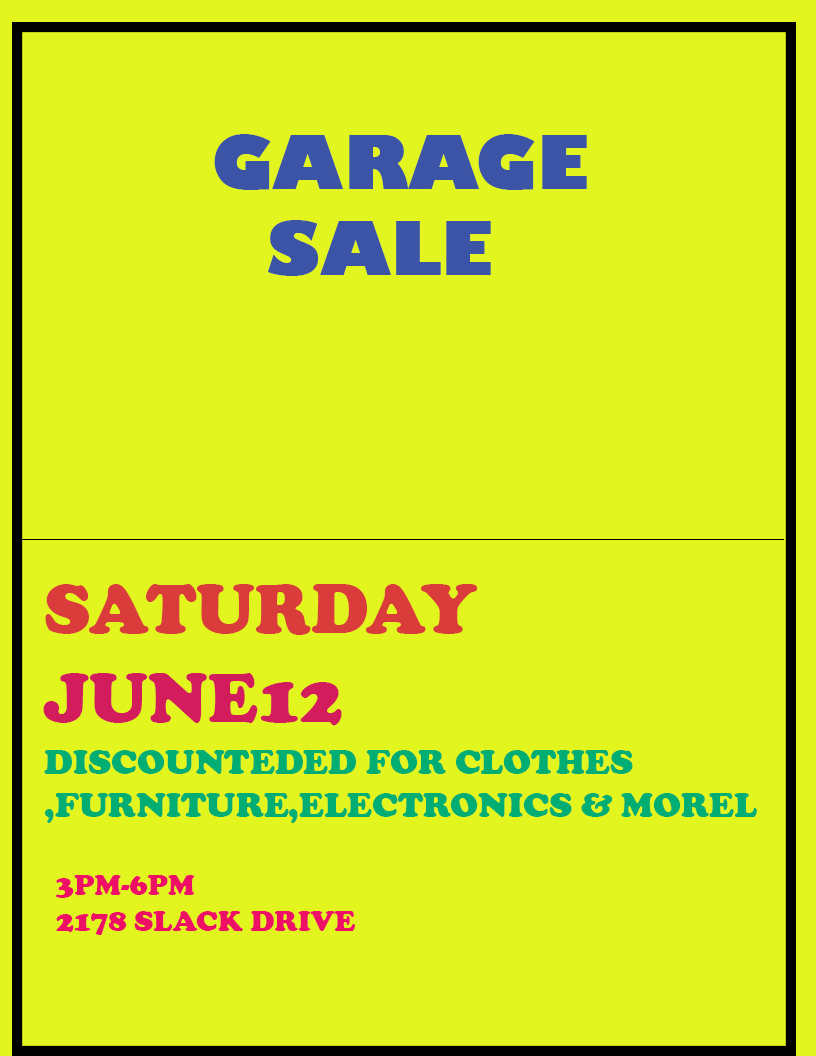
<style>
.page{position:relative;width:816px;height:1056px;background:#e3f51e}
.page>*{position:absolute;margin:0}
.t1{font:72px "GillSans-UltraBold";color:#3b54a5}
.t2{font:72px "CooperBlack";color:#000000}
.t3{font:72px "CooperBlack";color:#da3b3b}
.t4{font:72px "CooperBlack";color:#d31c5c}
.t5{font:36px "CooperBlack";color:#00ae74}
.t6{font:30px "CooperBlack";color:#ed1065}
</style>
<div class="page">
<p class="t1" style="left:214px;top:134px;width:373px;height:142px;text-align:right"><span class="t2">    </span>GARAGE<br>SALE</p>
<p class="t3" style="left:45px;top:584px;width:433px;height:51px">SATURDAY<span class="t2">AY</span></p>
<p class="t4" style="left:43px;top:673px;width:299px;height:53px">JUNE12</p>
<p class="t5" style="left:44px;top:750px;width:713px;height:73px;text-align:right">DISCOUNTEDED FOR CLOTHES ,FURNITURE,ELECTRONICS &amp; MOREL</p>
<p class="t6" style="left:56px;top:875px;width:299px;height:60px;text-align:right">3PM-6PM<br>2178 SLACK DRIVE</p>
</div>
